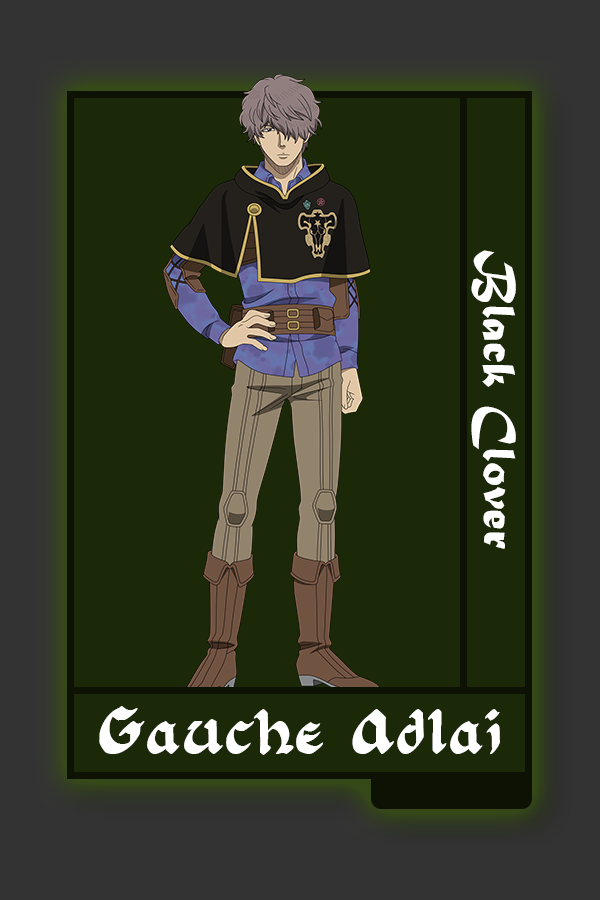
<style>
.page{position:relative;width:600px;height:900px;background:#1b2908}
.page>*{position:absolute;margin:0}
.t1{font:48.8px "MaturaMTScriptCapitals";color:#ffffff}
.t2{font:54.8px "FloranteatLaura";color:#ffffff}
</style>
<div class="page">
<p class="t1" style="left:471px;top:250px;width:45px;height:299px;rotate:90deg">Black Clover</p>
<p class="t2" style="left:99px;top:706px;width:401px;height:49px">Gauche Adlai</p>
</div>
